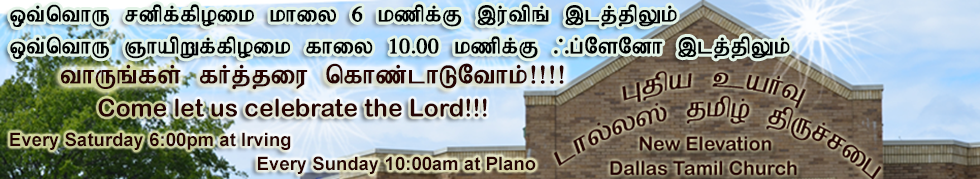
<style>
.page{position:relative;width:980px;height:179px}
.page>*{position:absolute;margin:0}
.t1{font:24.7px "Bamini-Plain";color:#000203;font-weight:bold}
.t2{font:28.8px "Bamini-Plain";color:#250403;font-weight:bold}
.t3{font:24.7px "ArialRoundedMTBold";color:#250403}
.t4{font:18.5px "Arial-BoldMT";color:#250403}
</style>
<div class="page">
<p class="t1" style="left:10px;top:4px;width:667px;height:23px">xt;nthU rdpf;fpoik khiy 6 kzpf;F ,u;tpq; ,lj;jpYk;</p>
<p class="t1" style="left:10px;top:36px;width:780px;height:23px">xt;nthU QhapWf;fpoik fhiy 10.00 kzpf;F /g;NsNdh ,lj;jpYk;</p>
<p class="t2" style="left:61px;top:63px;width:503px;height:27px">thUq;fs; fHj;jiu nfhz;lhLNthk;!!!!</p>
<p class="t3" style="left:98px;top:98px;width:389px;height:19px">Come let us celebrate the Lord!!!</p>
<p class="t4" style="left:10px;top:132px;width:281px;height:18px">Every Saturday 6:00pm at Irving</p>
<p class="t4" style="left:258px;top:156px;width:278px;height:18px">Every Sunday 10:00am at Plano</p>
</div>
